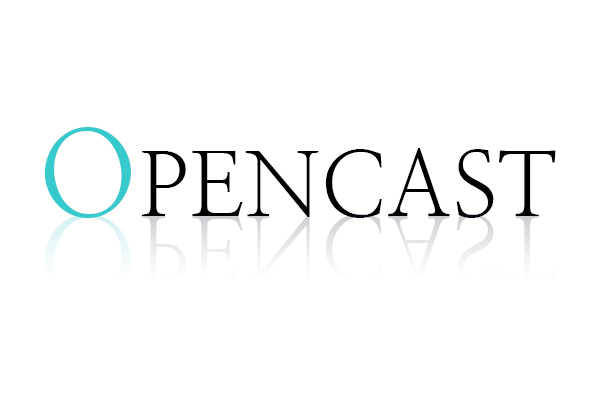
<style>
.page{position:relative;width:600px;height:400px;background:#ffffff}
.page>*{position:absolute;margin:0}
.t1{font:90px "NanumMyeongjo";color:#000000}
.t2{font:120px "NanumMyeongjo";color:#38c9cc}
</style>
<div class="page">
<p class="t1" style="left:44px;top:127px;width:512px;height:91px"><span class="t2">O</span>PENCAST</p>
</div>
